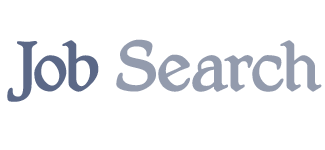
<style>
.page{position:relative;width:325px;height:150px;background:#ffffff}
.page>*{position:absolute;margin:0}
.t1{font:65.6px "Shrewsbury";color:#939bad}
.t2{font:65.6px "Shrewsbury";color:#5b6887}
</style>
<div class="page">
<p class="t1" style="left:7px;top:39px;width:315px;height:63px"><span class="t2">Job </span>Search</p>
</div>
